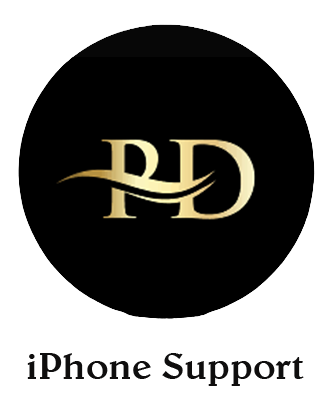
<style>
.page{position:relative;width:332px;height:408px;background:#ffffff}
.page>*{position:absolute;margin:0}
.t1{font:38.3px "BelweBT-Medium";color:#0f0e0e}
</style>
<div class="page">
<p class="t1" style="left:27px;top:353px;width:277px;height:33px">iPhone Support</p>
</div>
